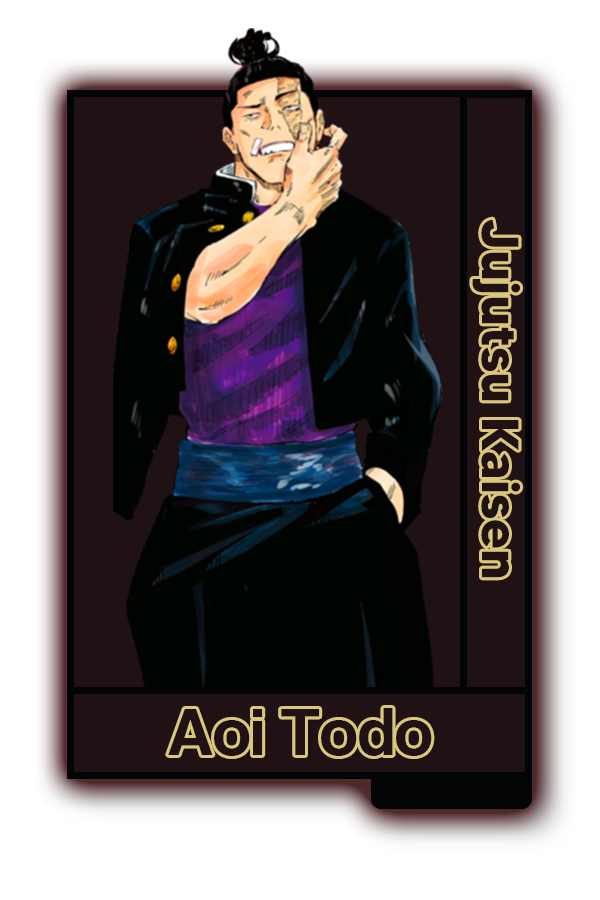
<style>
.page{position:relative;width:600px;height:900px;background:#1f1114}
.page>*{position:absolute;margin:0}
.t1{font:52px "MADETOMMY-Bold";color:#1e1214}
.t2{font:70.1px "CoolveticaRg-Regular";color:#1e1214}
</style>
<div class="page">
<p class="t1" style="left:472px;top:219px;width:49px;height:359px;rotate:90deg">Jujutsu Kaisen</p>
<p class="t2" style="left:168px;top:708px;width:264px;height:48px">Aoi Todo</p>
</div>
